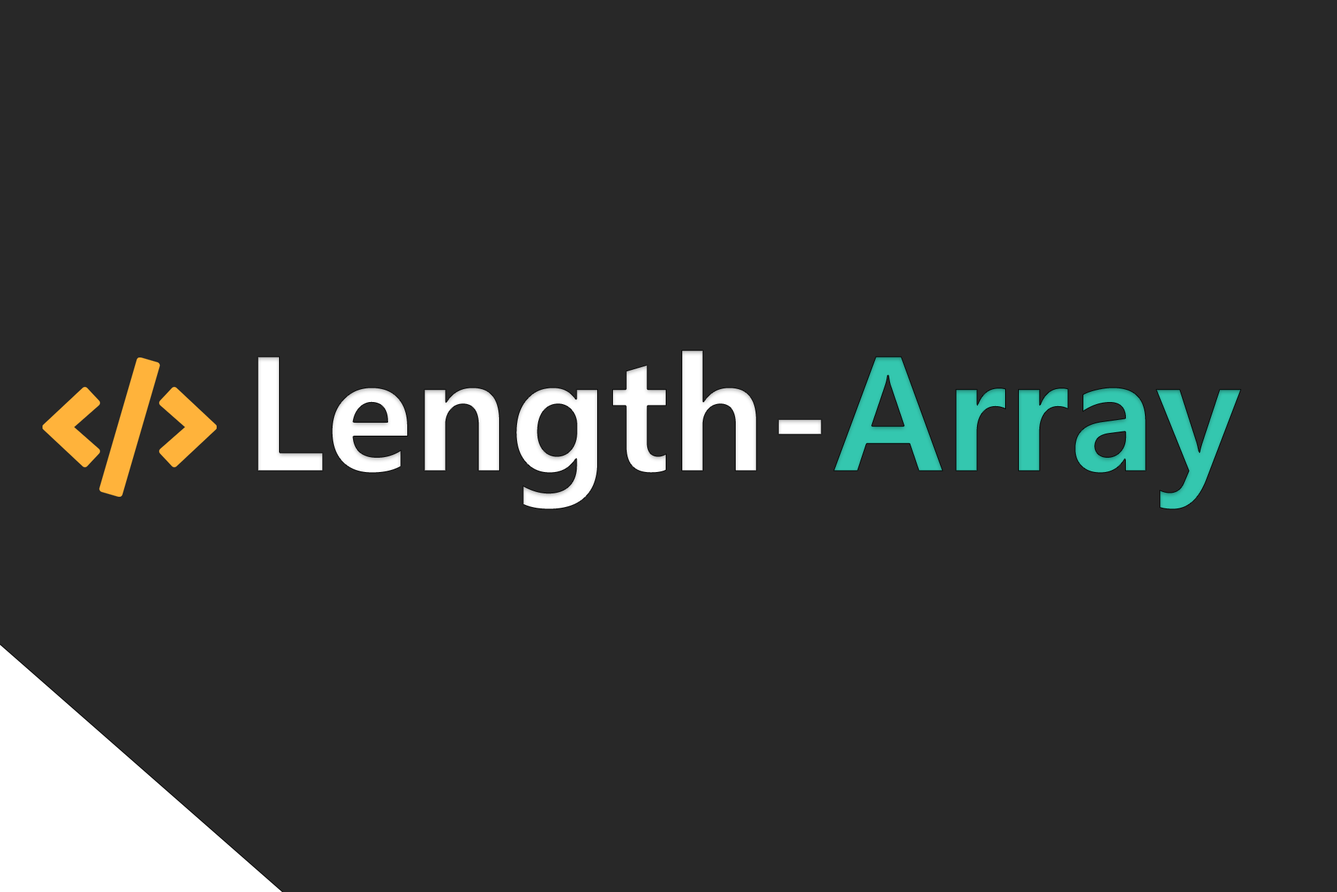
<style>
.page{position:relative;width:1337px;height:892px;background:#282828}
.page>*{position:absolute;margin:0}
.t1{font:159px "MalgunGothicBold";color:#ffffff}
.t2{font:159px "MalgunGothicBold";color:#34c7af}
</style>
<div class="page">
<p class="t1" style="left:257px;top:350px;width:985px;height:160px">Length-<span class="t2">Array</span></p>
</div>
